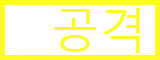
<style>
.page{position:relative;width:160px;height:60px;background:#ffffff}
.page>*{position:absolute;margin:0}
.t1{font:48px "MalgunGothicRegular";color:#fdfa24}
</style>
<div class="page">
<p class="t1" style="left:54px;top:8px;width:86px;height:45px">공격</p>
</div>
